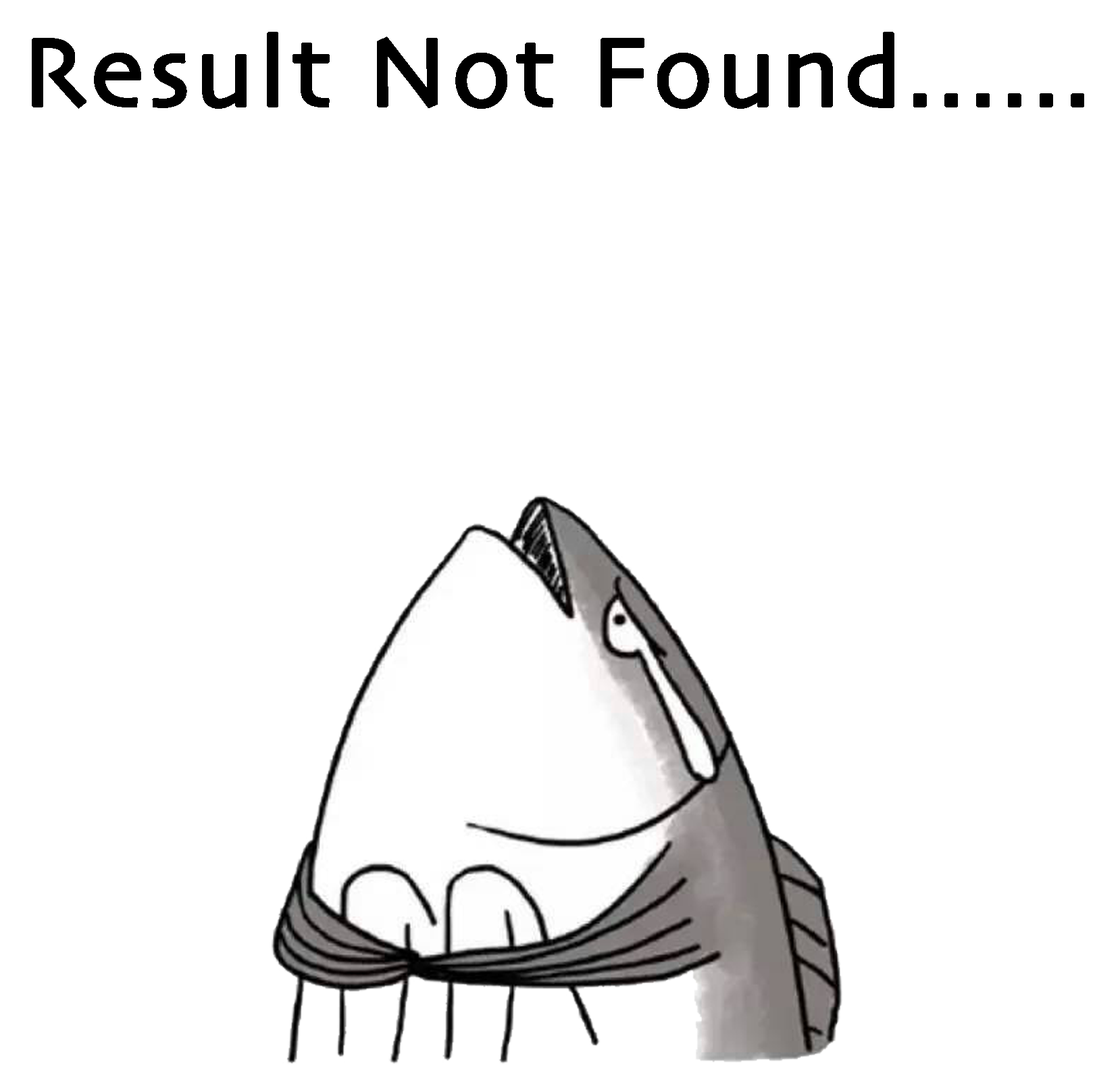
<style>
.page{position:relative;width:1120px;height:1065px;background:#ffffff}
.page>*{position:absolute;margin:0}
.t1{font:101.3px "Skia-Regular";letter-spacing:0.025em;color:#000000;font-weight:bold}
</style>
<div class="page">
<p class="t1" style="left:32px;top:32px;width:1052px;height:77px">Result Not Found......</p>
</div>
